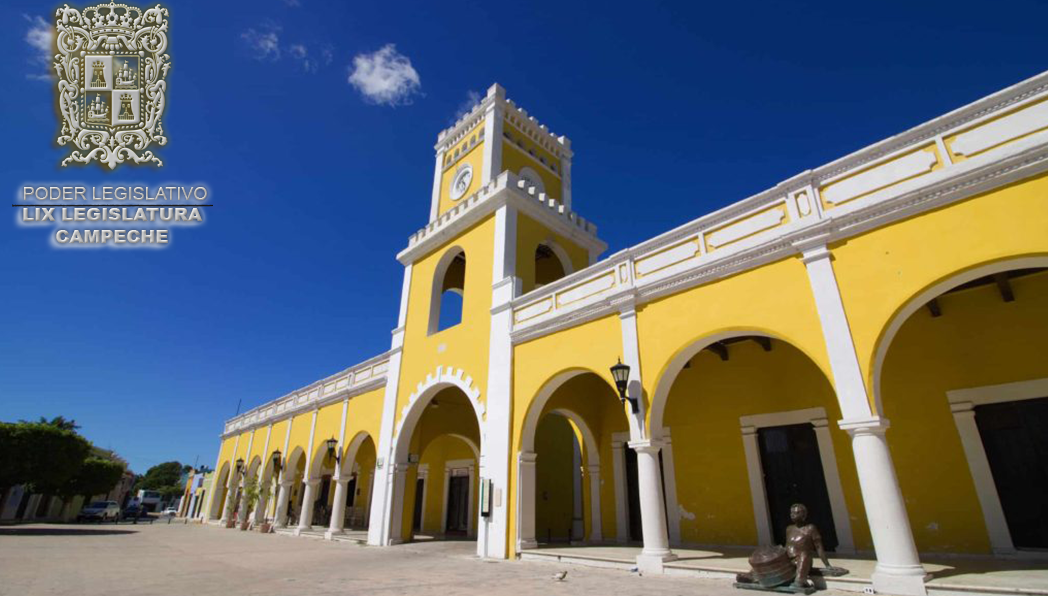
<style>
.page{position:relative;width:1048px;height:596px}
.page>*{position:absolute;margin:0}
.t1{font:18px "ArialMT"}
.t2{font:18px "Arial-Black"}
</style>
<div class="page">
<p class="t1" style="left:24px;top:187px;width:183px;height:13px">PODER LEGISLATIVO</p>
<p class="t1" style="left:24px;top:187px;width:183px;height:13px">PODER LEGISLATIVO</p>
<p class="t2" style="left:23px;top:208px;width:180px;height:35px;text-align:center">LIX LEGISLATURA<br>CAMPECHE</p>
<p class="t2" style="left:23px;top:208px;width:180px;height:35px;text-align:center">LIX LEGISLATURA<br>CAMPECHE</p>
</div>
